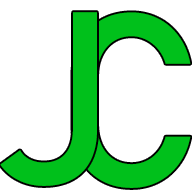
<style>
.page{position:relative;width:192px;height:192px;background:#ffffff}
.page>*{position:absolute;margin:0}
.t1{font:241.7px "Bahnschrift";letter-spacing:0.012em;color:#00c01b;font-weight:bold}
</style>
<div class="page">
<p class="t1" style="left:0px;top:12px;width:97px;height:174px">J</p>
<p class="t1" style="left:72px;top:12px;width:119px;height:176px">C</p>
</div>
